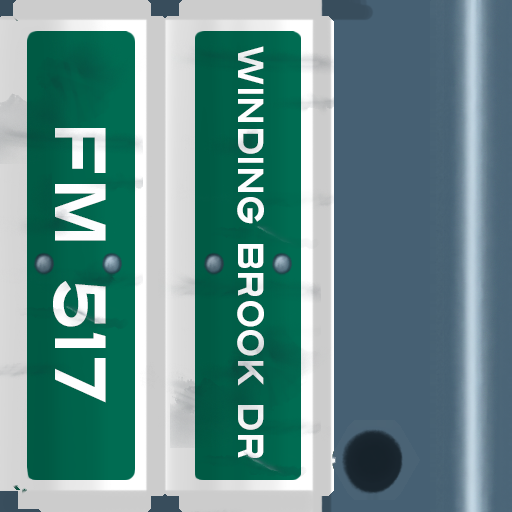
<style>
.page{position:relative;width:512px;height:512px}
.page>*{position:absolute;margin:0}
.t1{font:36px "Turnpike";color:#fefeff;scale:0.75 1}
.t2{font:72px "Turnpike";color:#fefeff;scale:0.75 1}
</style>
<div class="page">
<p class="t1" style="left:237px;top:46px;width:27px;height:412px;rotate:90deg">Winding Brook Dr</p>
<p class="t2" style="left:53px;top:128px;width:53px;height:275px;rotate:90deg">fm 517</p>
</div>
